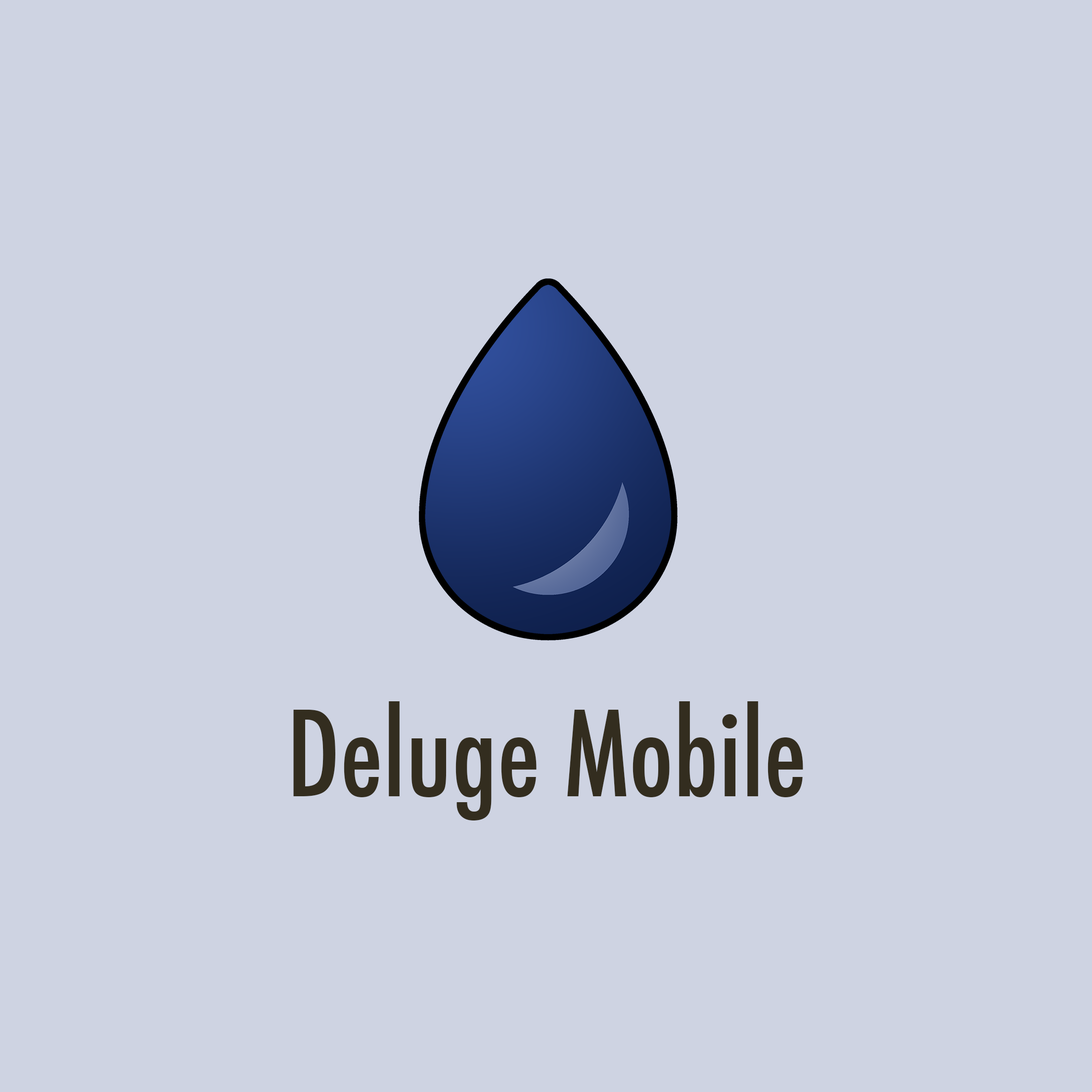
<style>
.page{position:relative;width:1092px;height:1092px;background:#ced3e2}
.page>*{position:absolute;margin:0}
.t1{font:114.8px "Futura-CondensedMedium";color:#332d1f}
</style>
<div class="page">
<p class="t1" style="left:293px;top:701px;width:510px;height:119px">Deluge Mobile</p>
</div>
